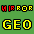
<style>
.page{position:relative;width:34px;height:34px;background:#55a646}
.page>*{position:absolute;margin:0}
.t1{font:7.9px "Gautami";letter-spacing:0.1em;color:#ff0000;text-transform:uppercase;scale:0.92 1}
.t2{font:7.9px "Gautami";letter-spacing:0.1em;color:#f6ff00;text-transform:uppercase;scale:0.92 1}
.t3{font:13.4px "Gautami";letter-spacing:0.1em;color:#f6ff00;text-transform:uppercase;font-weight:bold;scale:0.9 1}
</style>
<div class="page">
<p class="t1" style="left:2px;top:6px;width:30px;height:5px">MIR<span class="t2">ROR</span></p>
<p class="t3" style="left:3px;top:20px;width:28px;height:9px">GEO</p>
</div>
